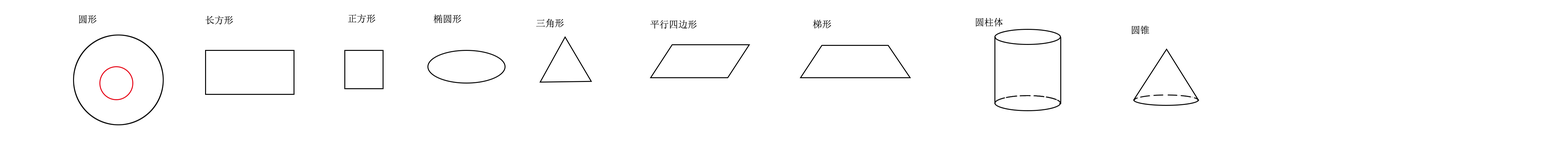
<style>
.page{position:relative;width:1568px;height:157px;background:#ffffff}
.page>*{position:absolute;margin:0}
.t1{font:9.4px "SimSun";color:#000000}
</style>
<div class="page">
<p class="t1" style="left:79px;top:15px;width:18px;height:9px">圆形</p>
<p class="t1" style="left:205px;top:16px;width:28px;height:8px">长方形</p>
<p class="t1" style="left:348px;top:14px;width:27px;height:9px">正方形</p>
<p class="t1" style="left:433px;top:14px;width:28px;height:9px">椭圆形</p>
<p class="t1" style="left:976px;top:18px;width:27px;height:9px">圆柱体</p>
<p class="t1" style="left:536px;top:19px;width:28px;height:9px">三角形</p>
<p class="t1" style="left:650px;top:20px;width:47px;height:9px">平行四边形</p>
<p class="t1" style="left:813px;top:19px;width:18px;height:10px">梯形</p>
<p class="t1" style="left:1132px;top:25px;width:17px;height:9px">圆锥</p>
</div>
